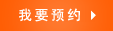
<style>
.page{position:relative;width:113px;height:31px}
.page>*{position:absolute;margin:0}
.t1{font:14px "SimHei";letter-spacing:0.16em;color:#ffffff}
</style>
<div class="page">
<p class="t1" style="left:19px;top:8px;width:61px;height:14px">我要预约</p>
</div>
